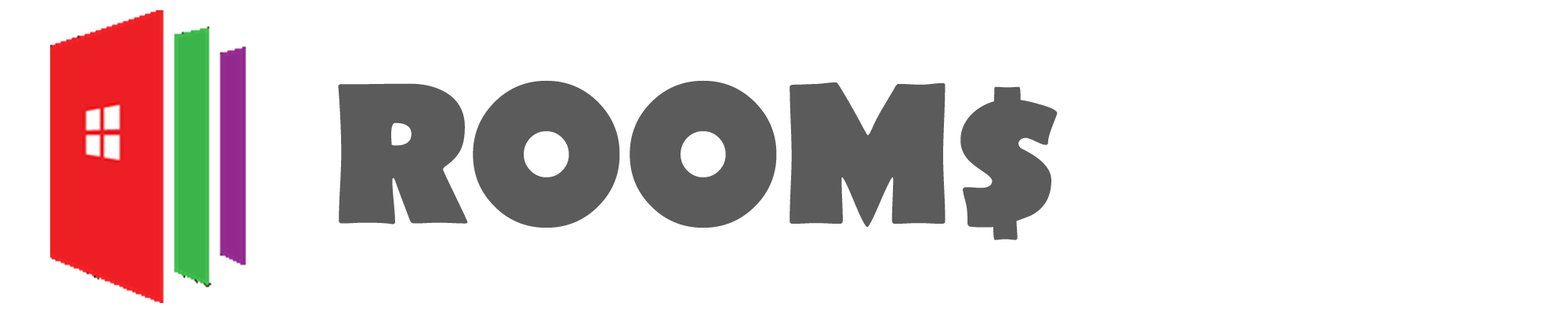
<style>
.page{position:relative;width:1568px;height:314px;background:#ffffff}
.page>*{position:absolute;margin:0}
.t1{font:202.2px "BerlinSansFB-Bold";color:#5b5b5b}
</style>
<div class="page">
<p class="t1" style="left:338px;top:80px;width:720px;height:160px">ROOM$</p>
</div>
